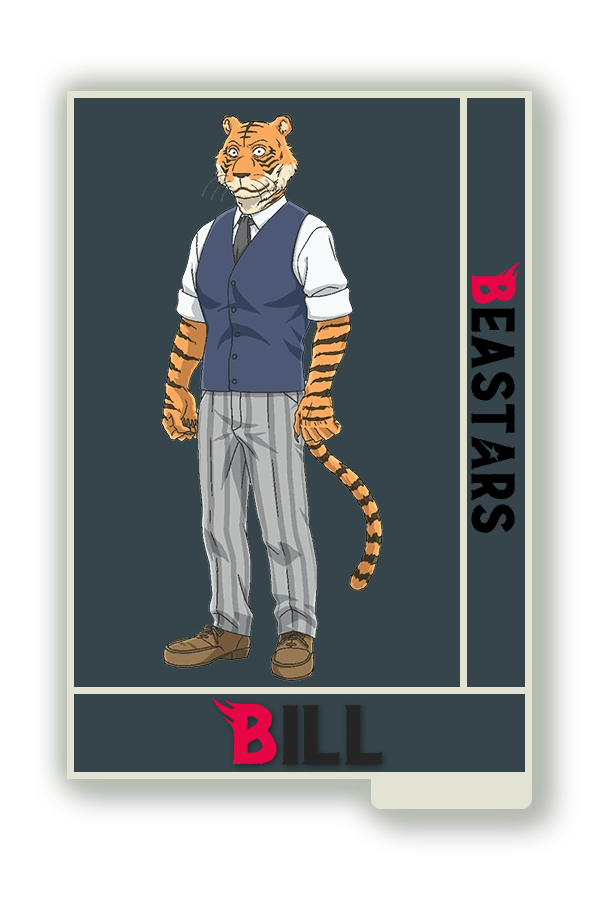
<style>
.page{position:relative;width:600px;height:900px;background:#36454b}
.page>*{position:absolute;margin:0}
.t1{font:48.8px "BEAST";color:#000000}
.t2{font:48.8px "BEAST";color:#e60646}
.t3{font:67px "BEAST";color:#252525;scale:1.12 1}
.t4{font:67px "BEAST";color:#e60646;scale:1.12 1}
</style>
<div class="page">
<p class="t1" style="left:471px;top:262px;width:50px;height:271px;rotate:90deg"><span class="t2">B</span>east@rs</p>
<p class="t3" style="left:212px;top:697px;width:170px;height:68px"><span class="t4">B</span>ill</p>
</div>
